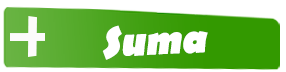
<style>
.page{position:relative;width:286px;height:72px;background:#ffffff}
.page>*{position:absolute;margin:0}
.t1{font:44.5px "BerlinSansFB-Bold";color:#ffffff;scale:0.9 1}
</style>
<div class="page">
<p class="t1" style="left:102px;top:25px;width:106px;height:35px;rotate:-3deg">Suma</p>
</div>
